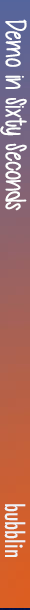
<style>
.page{position:relative;width:30px;height:610px}
.page>*{position:absolute;margin:0}
.t1{font:29.4px "Cutie-Patootie";color:#fefffe;scale:0.94 1}
.t2{font:24.4px "Futura-CondensedMedium";color:#eff3f6;scale:0.94 1}
</style>
<div class="page">
<p class="t1" style="left:0px;top:19px;width:27px;height:192px;rotate:90deg">Demo in Sixty Seconds</p>
<p class="t2" style="left:4px;top:504px;width:22px;height:53px;rotate:90deg">bubblin</p>
</div>
